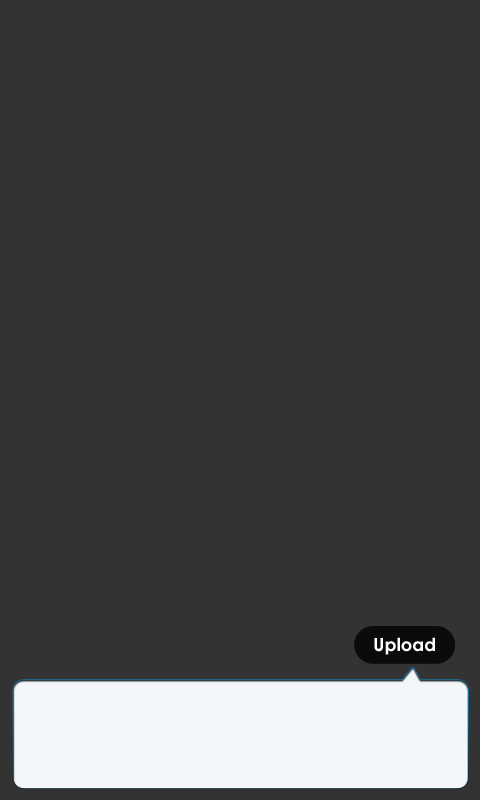
<style>
.page{position:relative;width:480px;height:800px;background:#333333}
.page>*{position:absolute;margin:0}
.t1{font:18px "CenturyGothic-Bold";color:#ffffff}
</style>
<div class="page">
<p class="t1" style="left:374px;top:637px;width:61px;height:18px">Upload</p>
</div>
